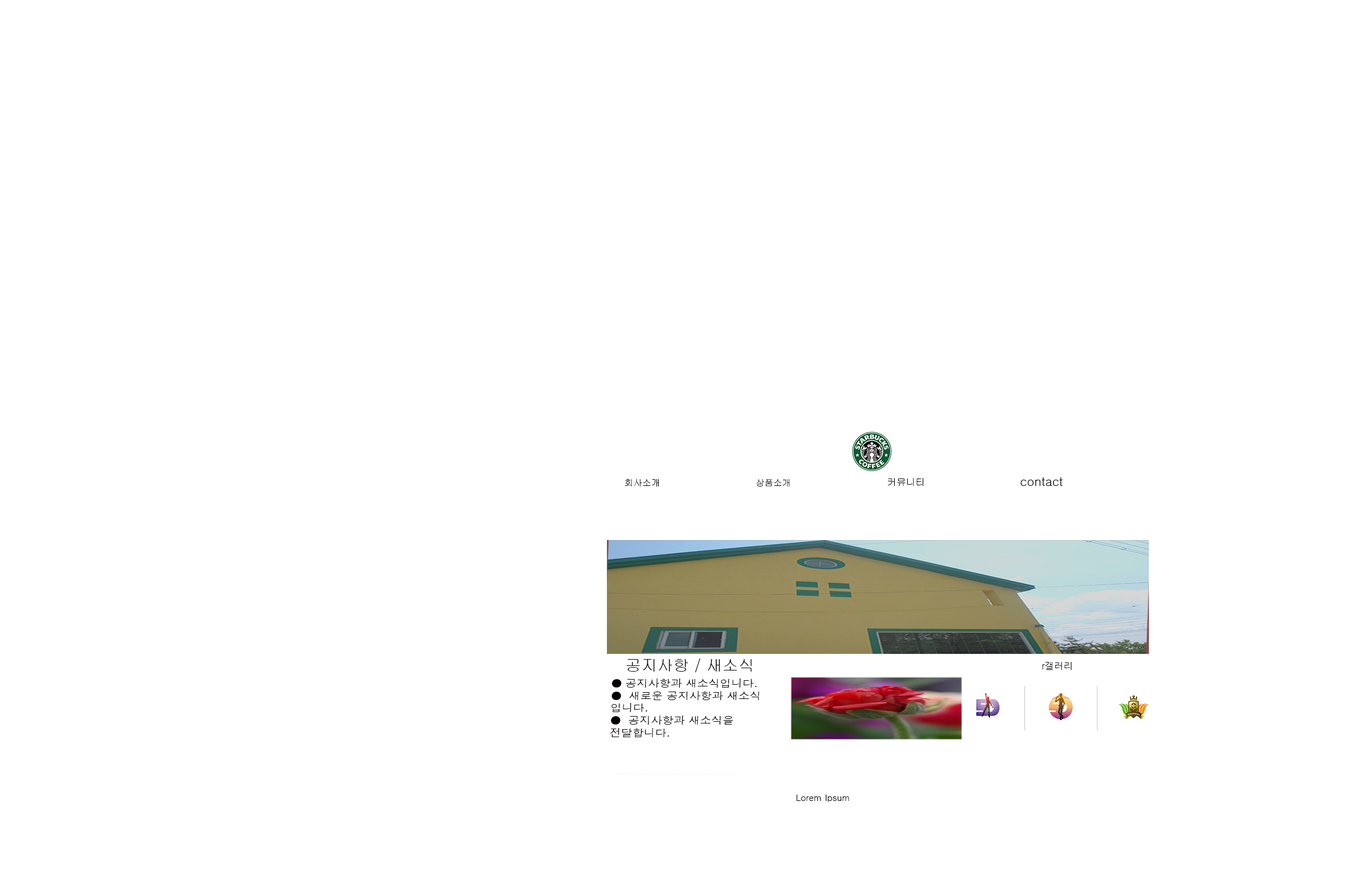
<style>
.page{position:relative;width:1362px;height:875px;background:#ffffff}
.page>*{position:absolute;margin:0}
.t1{font:8.9px "Gulim";color:#000000}
.t2{font:8.8px "Gulim";color:#000000}
.t3{font:9.5px "Gulim";color:#000000}
.t4{font:12.2px "Gulim";color:#000000}
.t5{font:16px "Gulim";color:#070101}
.t6{font:9.5px "Dotum";color:#070101}
.t7{font:10.3px "Dotum";color:#070101;scale:1.1 1}
.t8{font:8.9px "Dotum";color:#070101}
</style>
<div class="page">
<p class="t1" style="left:625px;top:479px;width:34px;height:8px">회사소개</p>
<p class="t2" style="left:756px;top:479px;width:34px;height:8px">상품소개</p>
<p class="t3" style="left:888px;top:478px;width:36px;height:8px">커뮤니티</p>
<p class="t4" style="left:1021px;top:478px;width:42px;height:8px">contact</p>
<p class="t5" style="left:626px;top:658px;width:126px;height:15px">공지사항 / 새소식</p>
<p class="t6" style="left:1042px;top:662px;width:30px;height:8px">r갤러리</p>
<p class="t7" style="left:610px;top:679px;width:149px;height:58px">● 공지사항과 새소식입니다.<br>●  새로운 공지사항과 새소식 입니다.<br>●  공지사항과 새소식을 전달합니다.</p>
<p class="t8" style="left:796px;top:795px;width:53px;height:7px">Lorem Ipsum</p>
</div>
